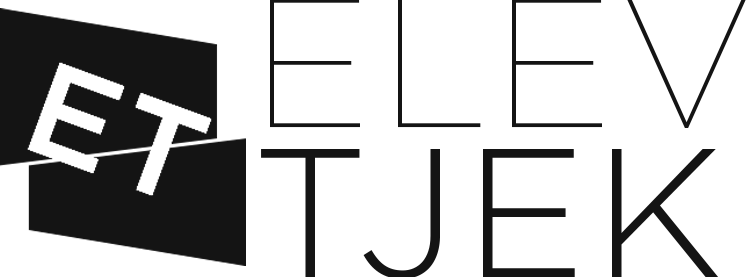
<style>
.page{position:relative;width:746px;height:277px;background:#ffffff}
.page>*{position:absolute;margin:0}
.t1{font:182.1px/150px "Gotham-Thin";letter-spacing:0.04em;color:#141414;text-transform:uppercase}
.t2{font:182.1px/150px "Gotham-Light";letter-spacing:0.04em;color:#141414;text-transform:uppercase}
</style>
<div class="page">
<p class="t1" style="left:261px;top:0px;width:485px;height:279px">elev<br><span class="t2">tjek</span></p>
</div>
